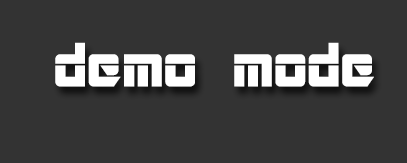
<style>
.page{position:relative;width:407px;height:163px;background:#333333}
.page>*{position:absolute;margin:0}
.t1{font:60px "ARDESTINE";color:#ffffff;scale:1.04 1}
</style>
<div class="page">
<p class="t1" style="left:55px;top:42px;width:319px;height:45px">demo mode</p>
</div>
